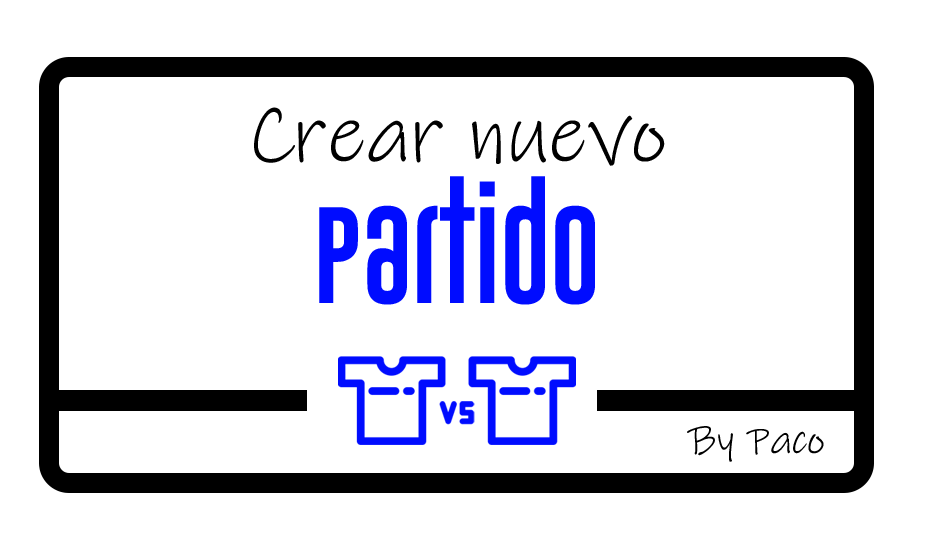
<style>
.page{position:relative;width:932px;height:546px;background:#ffffff}
.page>*{position:absolute;margin:0}
.t1{font:83.3px/141.7px "InkFree";color:#000000}
.t2{font:100px/141.7px "GoboldUplow";color:#000cff}
.t3{font:41.7px "InkFree";color:#000000}
</style>
<div class="page">
<p class="t1" style="left:254px;top:107px;width:411px;height:198px;text-align:center">Crear nuevo<br><span class="t2">Partido</span></p>
<p class="t3" style="left:687px;top:426px;width:137px;height:36px">By Paco</p>
</div>
